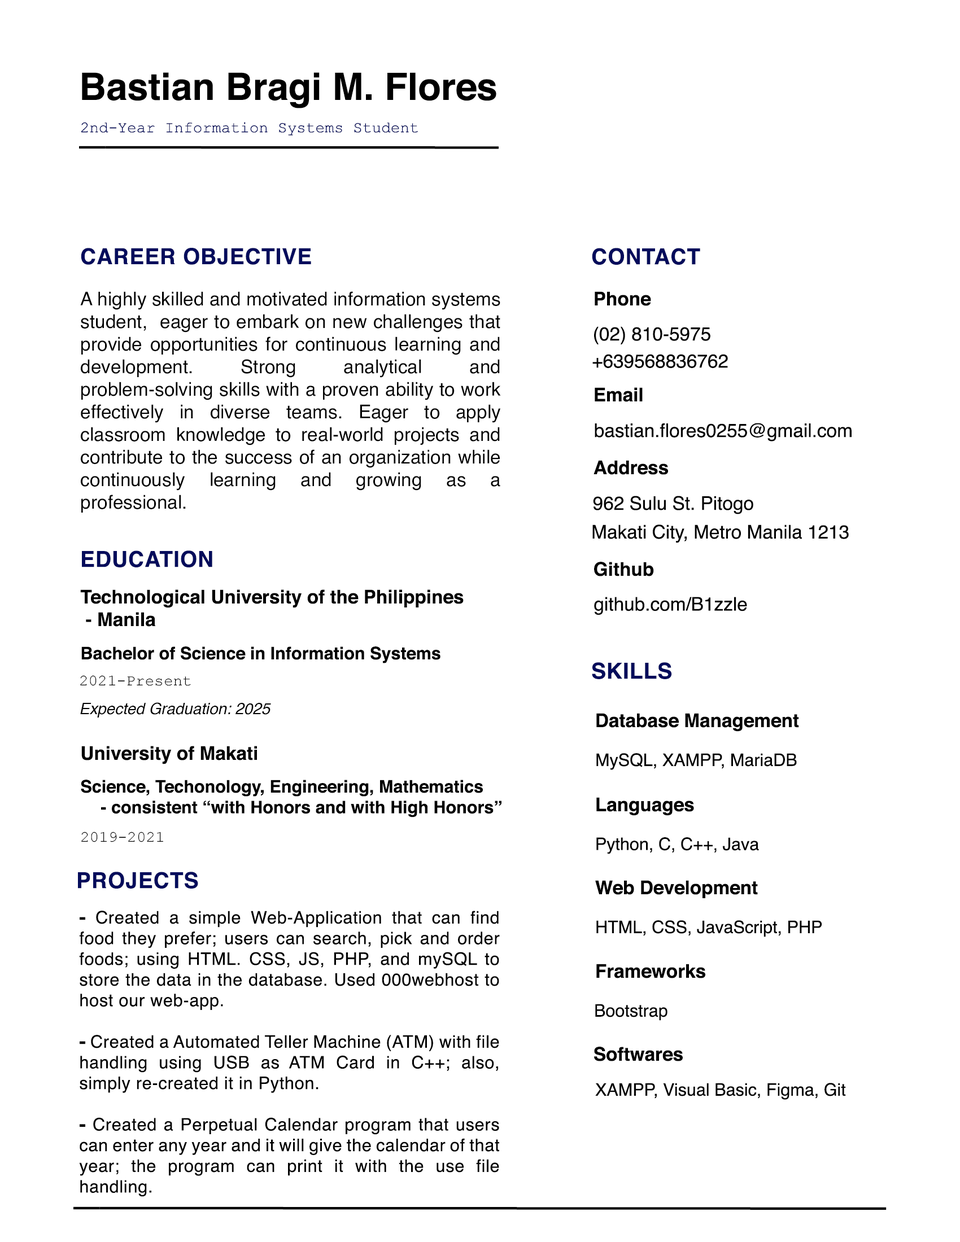
<style>
.page{position:relative;width:960px;height:1242px;background:#ffffff}
.page>*{position:absolute;margin:0}
.t1{font:37.6px "Helvetica-Bold";color:#000000}
.t2{font:15.7px "CourierNewPSMT";color:#040c5b}
.t3{font:47.1px "Mytupi-Bold";color:#000000}
.t4{font:22px "Helvetica-Bold";letter-spacing:0.025em;color:#040c5c}
.t5{font:22px "Helvetica-Bold";letter-spacing:0.025em;color:#040c5b}
.t6{font:18.8px "Helvetica";color:#000000}
.t7{font:18.8px "Helvetica-Bold";color:#000000}
.t8{font:17.3px "Helvetica-Bold";color:#000000}
.t9{font:15.7px "CourierNewPSMT";color:#000000}
.t10{font:15.7px "Helvetica-Oblique";color:#000000}
.t11{font:17.3px "Helvetica";color:#000000}
.t12{font:17.3px "Helvetica";letter-spacing:0.025em;color:#000000}
.t13{font:17.3px "HelveticaNeue-BlackCond";letter-spacing:0.025em;color:#000000}
</style>
<div class="page">
<p class="t1" style="left:82px;top:72px;width:414px;height:36px">Bastian Bragi M. Flores</p>
<p class="t2" style="left:81px;top:122px;width:337px;height:14px">2nd-Year Information Systems Student</p>
<p class="t3" style="left:79px;top:146px;width:420px;height:3px">________________</p>
<p class="t4" style="left:81px;top:248px;width:230px;height:17px">CAREER OBJECTIVE</p>
<p class="t5" style="left:592px;top:248px;width:108px;height:17px">CONTACT</p>
<p class="t6" style="left:80px;top:291px;width:421px;height:222px;text-align:justify">A highly skilled and motivated information systems student,  eager to embark on new challenges that provide opportunities for continuous learning and development. Strong analytical and problem-solving skills with a proven ability to work effectively in diverse teams. Eager to apply classroom knowledge to real-world projects and contribute to the success of an organization while continuously learning and growing as a professional.</p>
<p class="t7" style="left:595px;top:291px;width:56px;height:15px">Phone</p>
<p class="t6" style="left:594px;top:326px;width:116px;height:18px">(02) 810-5975</p>
<p class="t6" style="left:592px;top:354px;width:136px;height:14px">+639568836762</p>
<p class="t7" style="left:595px;top:387px;width:48px;height:15px">Email</p>
<p class="t6" style="left:595px;top:423px;width:256px;height:19px">bastian.flores0255@gmail.com</p>
<p class="t7" style="left:593px;top:460px;width:75px;height:15px">Address</p>
<p class="t6" style="left:593px;top:496px;width:160px;height:18px">962 Sulu St. Pitogo</p>
<p class="t6" style="left:592px;top:525px;width:257px;height:18px">Makati City, Metro Manila 1213</p>
<p class="t5" style="left:82px;top:551px;width:130px;height:16px">EDUCATION</p>
<p class="t7" style="left:594px;top:562px;width:60px;height:15px">Github</p>
<p class="t7" style="left:80px;top:589px;width:384px;height:38px;text-align:justify">Technological University of the Philippines<br> - Manila</p>
<p class="t6" style="left:594px;top:597px;width:153px;height:18px">github.com/B1zzle</p>
<p class="t8" style="left:81px;top:647px;width:359px;height:16px">Bachelor of Science in Information Systems</p>
<p class="t5" style="left:592px;top:662px;width:80px;height:17px">SKILLS</p>
<p class="t9" style="left:80px;top:675px;width:111px;height:11px">2021-Present</p>
<p class="t10" style="left:80px;top:702px;width:191px;height:16px">Expected Graduation: 2025</p>
<p class="t7" style="left:596px;top:713px;width:203px;height:19px">Database Management</p>
<p class="t7" style="left:81px;top:746px;width:176px;height:19px">University of Makati</p>
<p class="t11" style="left:596px;top:753px;width:201px;height:17px">MySQL, XAMPP, MariaDB</p>
<p class="t8" style="left:81px;top:780px;width:420px;height:38px;text-align:justify">Science, Techonology, Engineering, Mathematics<br> - consistent “with Honors and with High Honors”</p>
<p class="t7" style="left:596px;top:797px;width:98px;height:19px">Languages</p>
<p class="t9" style="left:81px;top:832px;width:82px;height:10px">2019-2021</p>
<p class="t11" style="left:596px;top:837px;width:163px;height:17px">Python, C, C++, Java</p>
<p class="t5" style="left:78px;top:872px;width:120px;height:17px">PROJECTS</p>
<p class="t7" style="left:595px;top:880px;width:163px;height:18px">Web Development</p>
<p class="t12" style="left:79px;top:911px;width:421px;height:286px;text-align:justify"><span class="t13">- </span>Created a simple Web-Application that can find food they prefer; users can search, pick and order foods; using HTML. CSS, JS, PHP, and mySQL to store the data in the database. Used 000webhost to host our web-app. <br><br><span class="t13">- </span>Created a Automated Teller Machine (ATM) with file handling using USB as ATM Card in C++; also, simply re-created it in Python.<br><br><span class="t13">-</span> Created a Perpetual Calendar program that users can enter any year and it will give the calendar of that year; the program can print it with the use file handling.</p>
<p class="t11" style="left:596px;top:920px;width:226px;height:17px">HTML, CSS, JavaScript, PHP</p>
<p class="t7" style="left:596px;top:964px;width:109px;height:15px">Frameworks</p>
<p class="t11" style="left:595px;top:1004px;width:72px;height:17px">Bootstrap</p>
<p class="t7" style="left:594px;top:1047px;width:89px;height:15px">Softwares</p>
<p class="t11" style="left:595px;top:1083px;width:251px;height:17px">XAMPP, Visual Basic, Figma, Git</p>
<p class="t3" style="left:73px;top:1207px;width:814px;height:3px">_______________________________</p>
</div>
